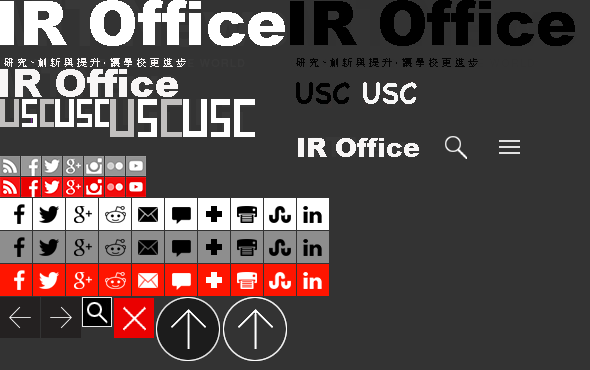
<style>
.page{position:relative;width:590px;height:370px;background:#333333}
.page>*{position:absolute;margin:0}
.t1{font:61px "Arial-Black";color:#ffffff}
.t2{font:61px "Arial-Black";color:#000000}
.t3{font:10px "STHeitiTC-Light";color:#faf7f7}
.t4{font:10px "STHeitiTC-Light";color:#030303}
.t5{font:38px "Arial-Black";color:#f8f6f6}
.t6{font:30px "Chalkboard-Bold";color:#000000}
.t7{font:30px "Chalkboard-Bold";color:#f7f7f7}
.t8{font:26px "Arial-Black";color:#f8f6f6}
</style>
<div class="page">
<p class="t1" style="left:0px;top:0px;width:285px;height:46px">IR Office</p>
<p class="t2" style="left:290px;top:0px;width:285px;height:46px">IR Office</p>
<p class="t3" style="left:4px;top:58px;width:182px;height:9px">研 究、創 新 與 提 升，讓 學 校 更 進 步</p>
<p class="t4" style="left:296px;top:58px;width:182px;height:9px">研 究、創 新 與 提 升，讓 學 校 更 進 步</p>
<p class="t5" style="left:0px;top:69px;width:178px;height:28px">IR Office</p>
<p class="t6" style="left:296px;top:82px;width:54px;height:22px">USC</p>
<p class="t7" style="left:363px;top:82px;width:54px;height:22px">USC</p>
<p class="t8" style="left:298px;top:138px;width:121px;height:19px">IR Office</p>
</div>
